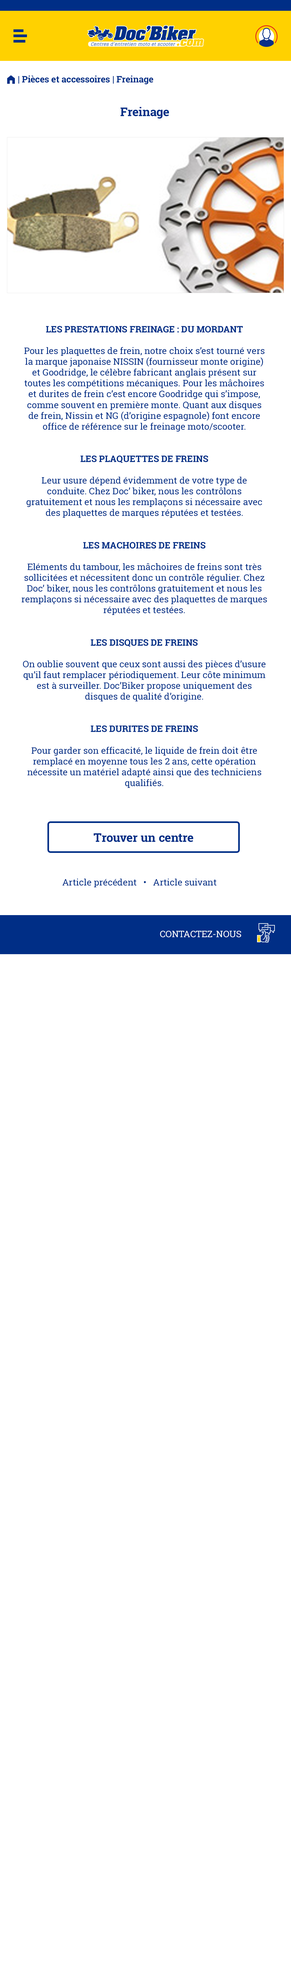
<style>
.page{position:relative;width:291px;height:1987px;background:#ffffff}
.page>*{position:absolute;margin:0}
.t1{font:9px "RobotoSlab-Bold";color:#002e86}
.t2{font:9px "FoundationIconsGeneral-Reg";color:#002e86}
.t3{font:12px "RobotoSlab-Bold";color:#002e86}
.t4{font:9px "RobotoSlab-Regular";color:#002e86}
.t5{font:9px "RobotoSlab-Regular";color:#ffffff;text-transform:uppercase}
</style>
<div class="page">
<p class="t1" style="left:7px;top:75px;width:146px;height:9px"><span class="t2">m </span>| Pièces et accessoires | Freinage</p>
<p class="t3" style="left:120px;top:107px;width:49px;height:12px">Freinage</p>
<p class="t4" style="left:22px;top:326px;width:245px;height:462px;text-align:center"><span class="t1">LES PRESTATIONS FREINAGE : DU MORDANT<br></span><br>Pour les plaquettes de frein, notre choix s’est tourné vers la marque japonaise NISSIN (fournisseur monte origine) et Goodridge, le célèbre fabricant anglais présent sur toutes les compétitions mécaniques. Pour les mâchoires et durites de frein c’est encore Goodridge qui s’impose, comme souvent en première monte. Quant aux disques de frein, Nissin et NG (d’origine espagnole) font encore office de référence sur le freinage moto/scooter.<br> <br> <br><span class="t1">LES PLAQUETTES DE FREINS<br></span><br>Leur usure dépend évidemment de votre type de conduite. Chez Doc’ biker, nous les contrôlons gratuitement et nous les remplaçons si nécessaire avec des plaquettes de marques réputées et testées.<br> <br> <br><span class="t1">LES MACHOIRES DE FREINS<br></span><br>Eléments du tambour, les mâchoires de freins sont très sollicitées et nécessitent donc un contrôle régulier. Chez Doc’ biker, nous les contrôlons gratuitement et nous les remplaçons si nécessaire avec des plaquettes de marques réputées et testées.<br> <br> <br><span class="t1">LES DISQUES DE FREINS<br></span><br>On oublie souvent que ceux sont aussi des pièces d’usure qu’il faut remplacer périodiquement. Leur côte minimum est à surveiller. Doc’Biker propose uniquement des disques de qualité d’origine.<br> <br> <br><span class="t1">LES DURITES DE FREINS<br></span><br>Pour garder son efficacité, le liquide de frein doit être remplacé en moyenne tous les 2 ans, cette opération nécessite un matériel adapté ainsi que des techniciens qualifiés.</p>
<p class="t3" style="left:93px;top:833px;width:100px;height:9px">Trouver un centre</p>
<p class="t4" style="left:62px;top:878px;width:155px;height:9px">Article précédent   •   Article suivant</p>
<p class="t5" style="left:160px;top:931px;width:81px;height:6px">contactez-nous</p>
</div>
